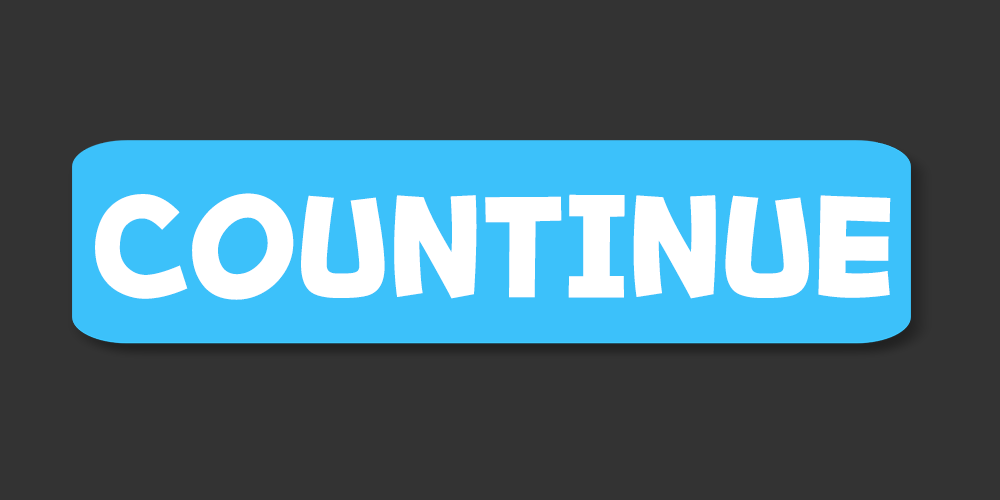
<style>
.page{position:relative;width:1000px;height:500px;background:#333333}
.page>*{position:absolute;margin:0}
.t1{font:130px "KoreanPONM-R";color:#ffffff}
</style>
<div class="page">
<p class="t1" style="left:95px;top:193px;width:796px;height:107px">COUNTINUE</p>
</div>
